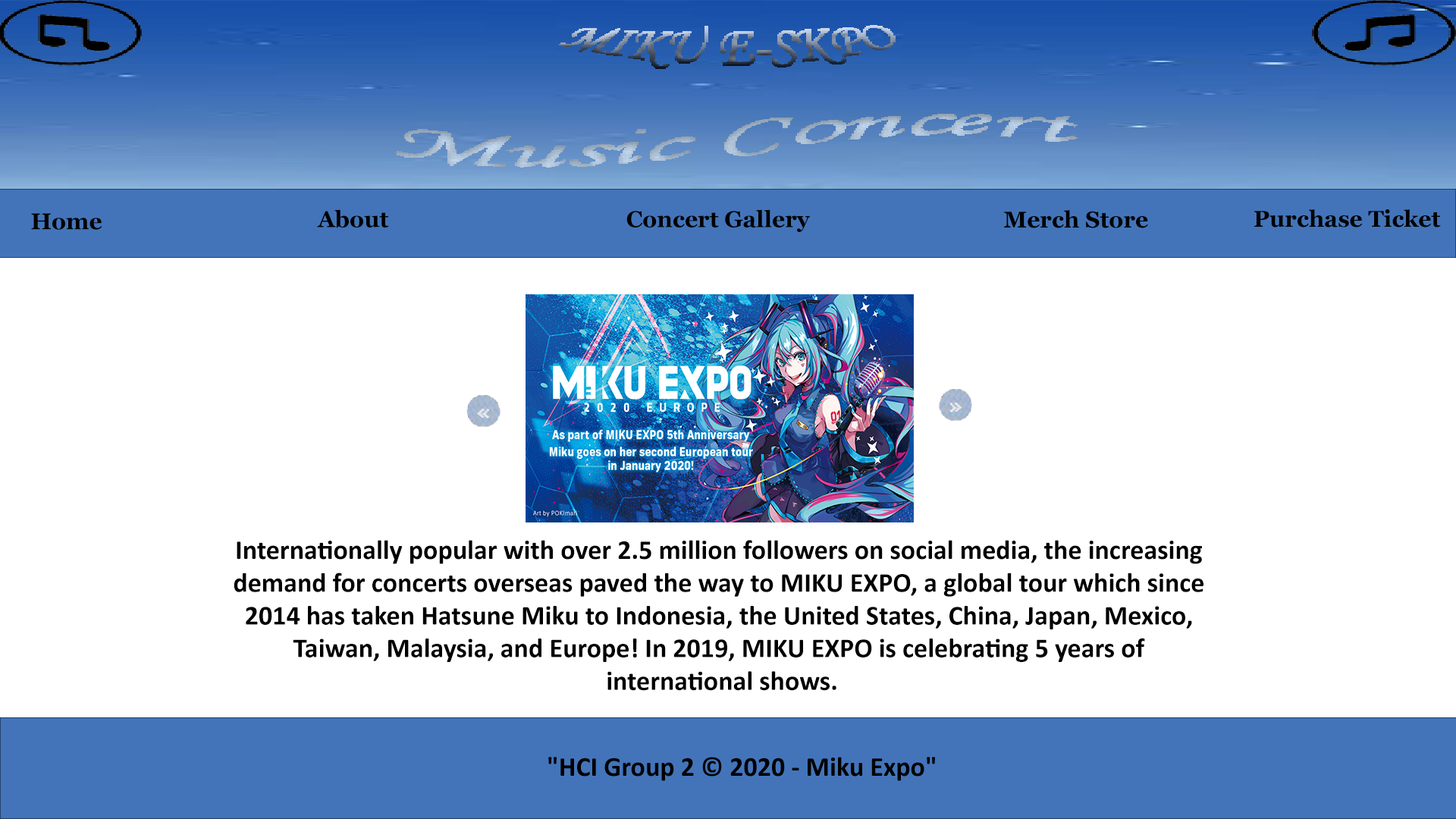
<style>
.page{position:relative;width:1456px;height:819px;background:#ffffff}
.page>*{position:absolute;margin:0}
.t1{font:22.7px "Georgia-Bold";color:#000000}
.t2{font:27.3px "Calibri-Bold";color:#000000}
</style>
<div class="page">
<p class="t1" style="left:317px;top:209px;width:72px;height:19px">About</p>
<p class="t1" style="left:626px;top:209px;width:184px;height:23px">Concert Gallery</p>
<p class="t1" style="left:1254px;top:209px;width:187px;height:18px">Purchase Ticket</p>
<p class="t1" style="left:31px;top:213px;width:71px;height:17px">Home</p>
<p class="t1" style="left:1004px;top:210px;width:144px;height:18px">Merch Store</p>
<p class="t2" style="left:234px;top:540px;width:969px;height:151px;text-align:center">Internationally popular with over 2.5 million followers on social media, the increasing <br>demand for concerts overseas paved the way to MIKU EXPO, a global tour which since <br>2014 has taken Hatsune Miku to Indonesia, the United States, China, Japan, Mexico, <br>Taiwan, Malaysia, and Europe! In 2019, MIKU EXPO is celebrating 5 years of <br>international shows.</p>
<p class="t2" style="left:548px;top:757px;width:387px;height:24px">"HCI Group 2 © 2020 - Miku Expo"</p>
</div>
